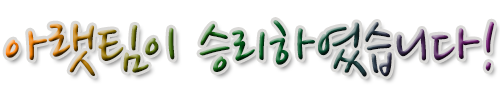
<style>
.page{position:relative;width:500px;height:100px;background:#ffffff}
.page>*{position:absolute;margin:0}
.t1{font:72px "NanumPen"}
</style>
<div class="page">
<p class="t1" style="left:5px;top:20px;width:489px;height:57px">아랫팀이 승리하였습니다!</p>
</div>
